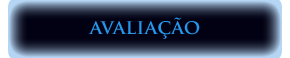
<style>
.page{position:relative;width:290px;height:58px;background:#010113}
.page>*{position:absolute;margin:0}
.t1{font:20px "TrajanPro-Bold";color:#2598ec}
</style>
<div class="page">
<p class="t1" style="left:88px;top:17px;width:112px;height:22px">avaliação</p>
</div>
